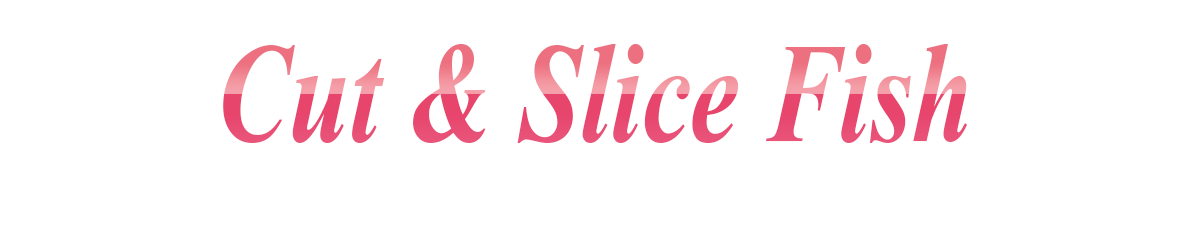
<style>
.page{position:relative;width:1200px;height:250px;background:#ffffff}
.page>*{position:absolute;margin:0}
.t1{font:177.4px "Vijaya-Bold";scale:0.77 1}
</style>
<div class="page">
<p class="t1" style="left:223px;top:44px;width:745px;height:99px">Cut &amp; Slice Fish</p>
</div>
